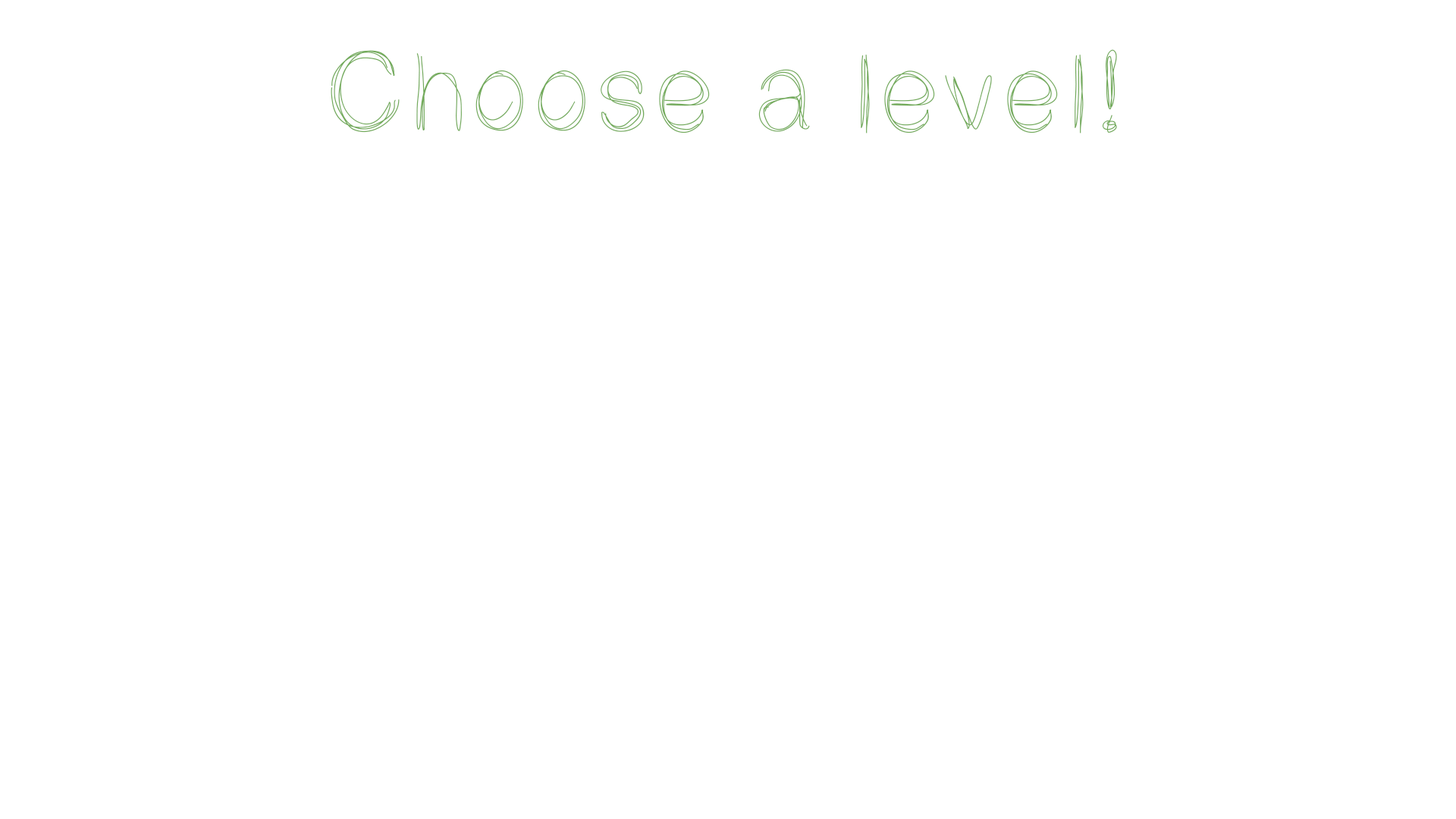
<style>
.page{position:relative;width:1456px;height:819px;background:#ffffff}
.page>*{position:absolute;margin:0}
.t1{font:112.1px "LightScribe";color:#73ab5b}
</style>
<div class="page">
<p class="t1" style="left:331px;top:49px;width:786px;height:84px">Choose a level!</p>
</div>
